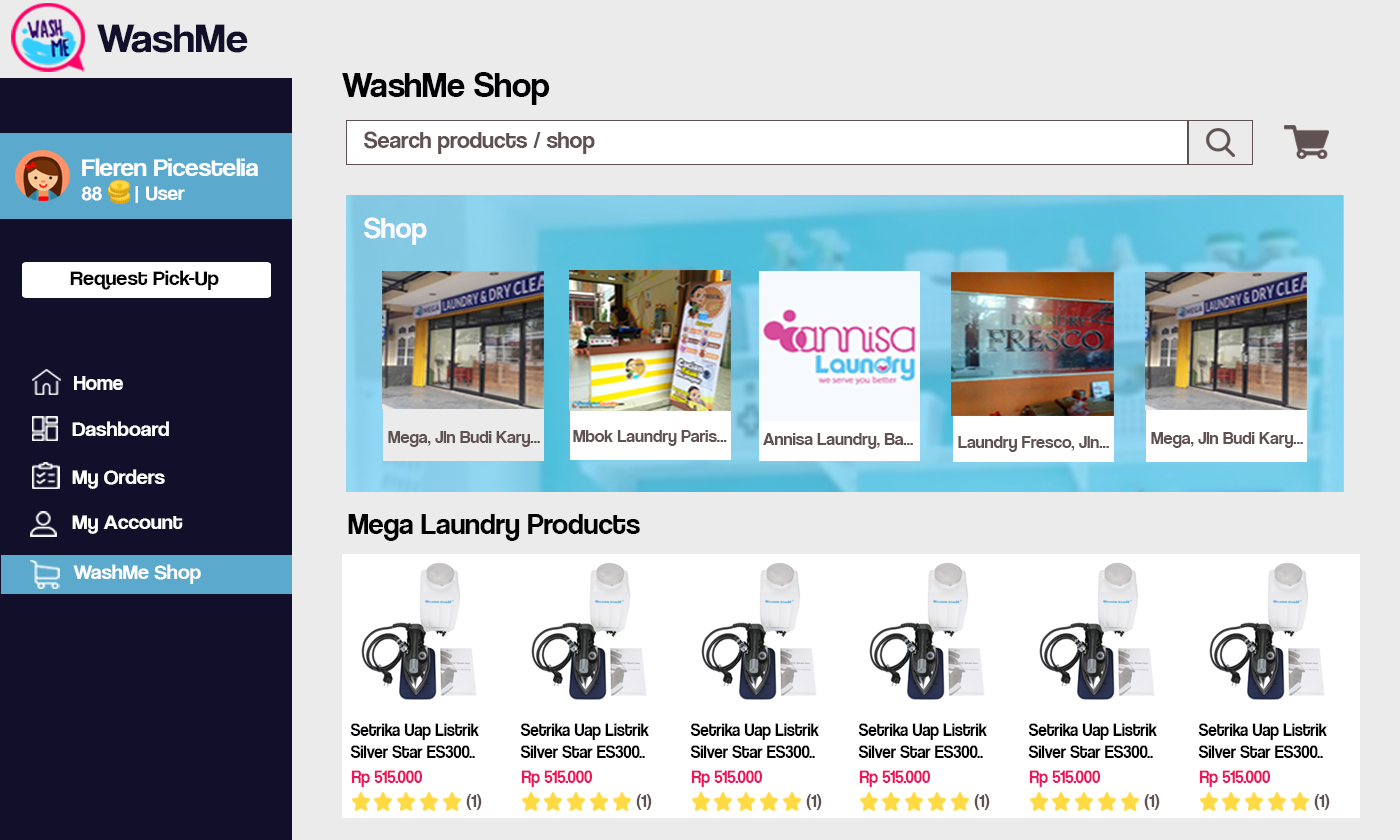
<style>
.page{position:relative;width:1400px;height:840px;background:#ebebeb}
.page>*{position:absolute;margin:0}
.t1{font:42.1px "CoolveticaRg-Regular";color:#120f2b;scale:1.05 1}
.t2{font:36px "CoolveticaRg-Regular";color:#000003}
.t3{font:24px "CoolveticaRg-Regular";color:#605252}
.t4{font:25.2px "CoolveticaRg-Regular";color:#ffffff;scale:1.05 1}
.t5{font:20px "CoolveticaRg-Regular";color:#ffffff;scale:1.05 1}
.t6{font:30px "CoolveticaRg-Regular";color:#f9f9ff}
.t7{font:21px "CoolveticaRg-Regular";color:#000000;scale:1.05 1}
.t8{font:21px "CoolveticaRg-Regular";color:#ffffff}
.t9{font:21px "CoolveticaRg-Regular";color:#ffffff;scale:1.05 1}
.t10{font:18px "CoolveticaRg-Regular";color:#605252}
.t11{font:30px "CoolveticaRg-Regular";color:#000000}
.t12{font:18px "CoolveticaRg-Regular";color:#000003;scale:0.94 1}
.t13{font:18px "CoolveticaRg-Regular";color:#ed145b;scale:0.94 1}
</style>
<div class="page">
<p class="t1" style="left:97px;top:24px;width:151px;height:29px">WashMe</p>
<p class="t2" style="left:342px;top:72px;width:208px;height:33px">WashMe Shop</p>
<p class="t3" style="left:364px;top:131px;width:231px;height:23px">Search products / shop</p>
<p class="t4" style="left:81px;top:158px;width:177px;height:45px">Fleren Picestelia<br><span class="t5">88      | User</span></p>
<p class="t6" style="left:364px;top:217px;width:63px;height:28px">Shop</p>
<p class="t7" style="left:70px;top:270px;width:149px;height:20px">Request Pick-Up</p>
<p class="t8" style="left:74px;top:376px;width:49px;height:14px">Home</p>
<p class="t9" style="left:72px;top:421px;width:97px;height:15px">Dashboard</p>
<p class="t10" style="left:388px;top:431px;width:152px;height:16px">Mega, Jln Budi Kary...</p>
<p class="t10" style="left:573px;top:430px;width:154px;height:16px">Mbok Laundry Paris...</p>
<p class="t10" style="left:763px;top:433px;width:150px;height:16px">Annisa Laundry, Ba...</p>
<p class="t10" style="left:958px;top:436px;width:151px;height:16px">Laundry Fresco, Jln...</p>
<p class="t10" style="left:1151px;top:432px;width:152px;height:16px">Mega, Jln Budi Kary...</p>
<p class="t9" style="left:72px;top:469px;width:93px;height:20px">My Orders</p>
<p class="t9" style="left:72px;top:515px;width:111px;height:19px">My Account</p>
<p class="t11" style="left:348px;top:514px;width:292px;height:27px">Mega Laundry Products</p>
<p class="t9" style="left:73px;top:564px;width:128px;height:20px">WashMe Shop</p>
<p class="t12" style="left:350px;top:723px;width:129px;height:35px">Setrika Uap Listrik<br>Silver Star ES300..</p>
<p class="t12" style="left:520px;top:723px;width:129px;height:35px">Setrika Uap Listrik<br>Silver Star ES300..</p>
<p class="t12" style="left:690px;top:723px;width:129px;height:35px">Setrika Uap Listrik<br>Silver Star ES300..</p>
<p class="t12" style="left:858px;top:723px;width:129px;height:35px">Setrika Uap Listrik<br>Silver Star ES300..</p>
<p class="t12" style="left:1028px;top:723px;width:129px;height:35px">Setrika Uap Listrik<br>Silver Star ES300..</p>
<p class="t12" style="left:1198px;top:723px;width:129px;height:35px">Setrika Uap Listrik<br>Silver Star ES300..</p>
<p class="t13" style="left:351px;top:770px;width:71px;height:17px">Rp 515.000</p>
<p class="t13" style="left:521px;top:770px;width:71px;height:17px">Rp 515.000</p>
<p class="t13" style="left:691px;top:770px;width:71px;height:17px">Rp 515.000</p>
<p class="t13" style="left:859px;top:770px;width:71px;height:17px">Rp 515.000</p>
<p class="t13" style="left:1029px;top:770px;width:71px;height:17px">Rp 515.000</p>
<p class="t13" style="left:1199px;top:770px;width:71px;height:17px">Rp 515.000</p>
<p class="t10" style="left:466px;top:794px;width:16px;height:16px">(1)</p>
<p class="t10" style="left:636px;top:794px;width:16px;height:16px">(1)</p>
<p class="t10" style="left:806px;top:794px;width:16px;height:16px">(1)</p>
<p class="t10" style="left:974px;top:794px;width:16px;height:16px">(1)</p>
<p class="t10" style="left:1144px;top:794px;width:16px;height:16px">(1)</p>
<p class="t10" style="left:1314px;top:794px;width:16px;height:16px">(1)</p>
</div>
